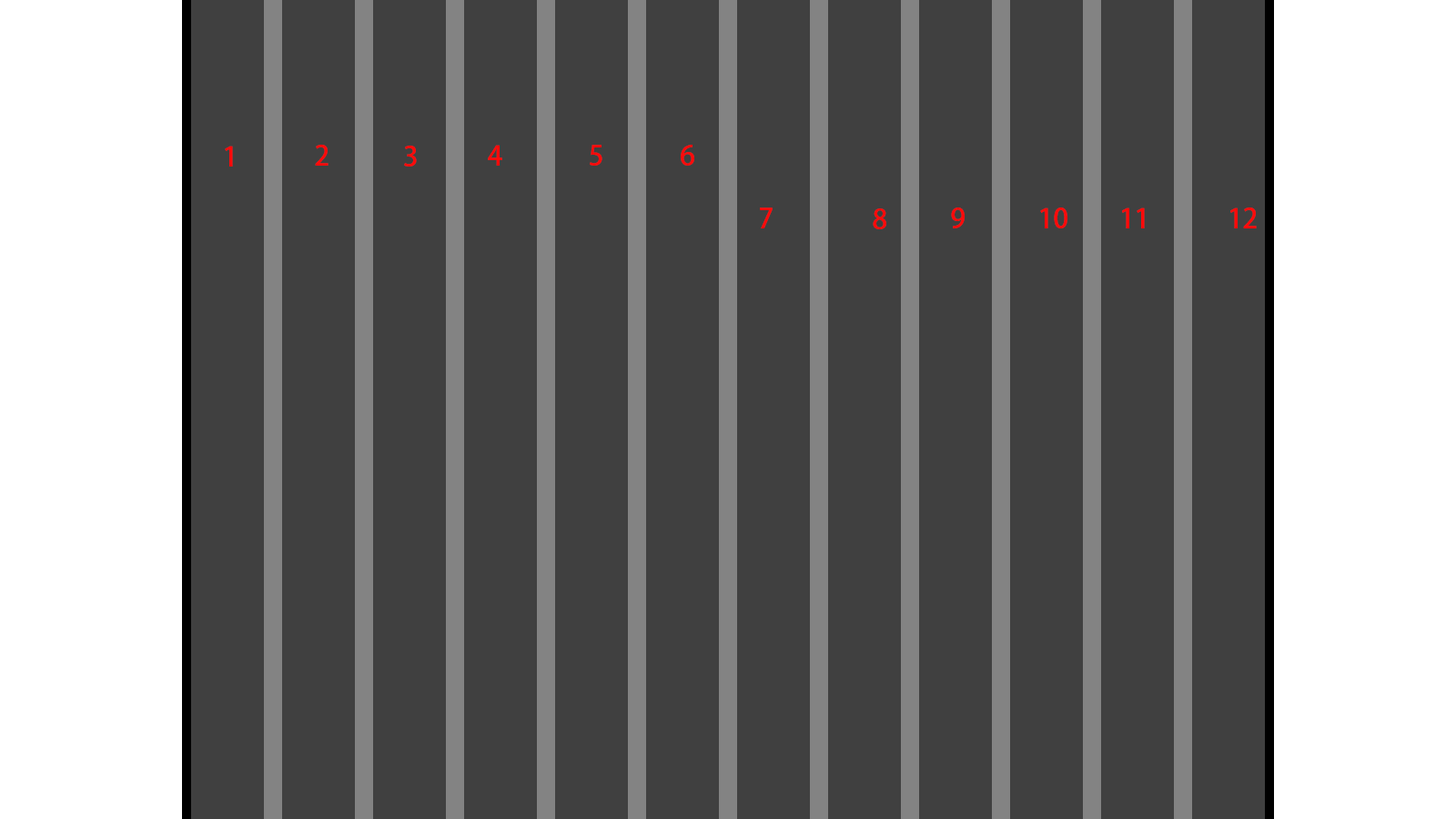
<style>
.page{position:relative;width:1456px;height:819px;background:#404040}
.page>*{position:absolute;margin:0}
.t1{font:27.3px "AdobeHeitiStd-Regular";color:#ff0a0a}
</style>
<div class="page">
<p class="t1" style="left:225px;top:146px;width:8px;height:21px">1</p>
<p class="t1" style="left:315px;top:145px;width:14px;height:21px">2</p>
<p class="t1" style="left:404px;top:146px;width:13px;height:21px">3</p>
<p class="t1" style="left:488px;top:145px;width:14px;height:21px">4</p>
<p class="t1" style="left:590px;top:145px;width:12px;height:21px">5</p>
<p class="t1" style="left:681px;top:145px;width:13px;height:21px">6</p>
<p class="t1" style="left:760px;top:207px;width:13px;height:21px">7</p>
<p class="t1" style="left:873px;top:208px;width:13px;height:21px">8</p>
<p class="t1" style="left:951px;top:207px;width:14px;height:21px">9</p>
<p class="t1" style="left:1040px;top:207px;width:27px;height:21px">10</p>
<p class="t1" style="left:1122px;top:207px;width:23px;height:21px">11</p>
<p class="t1" style="left:1230px;top:207px;width:27px;height:21px">12</p>
</div>
